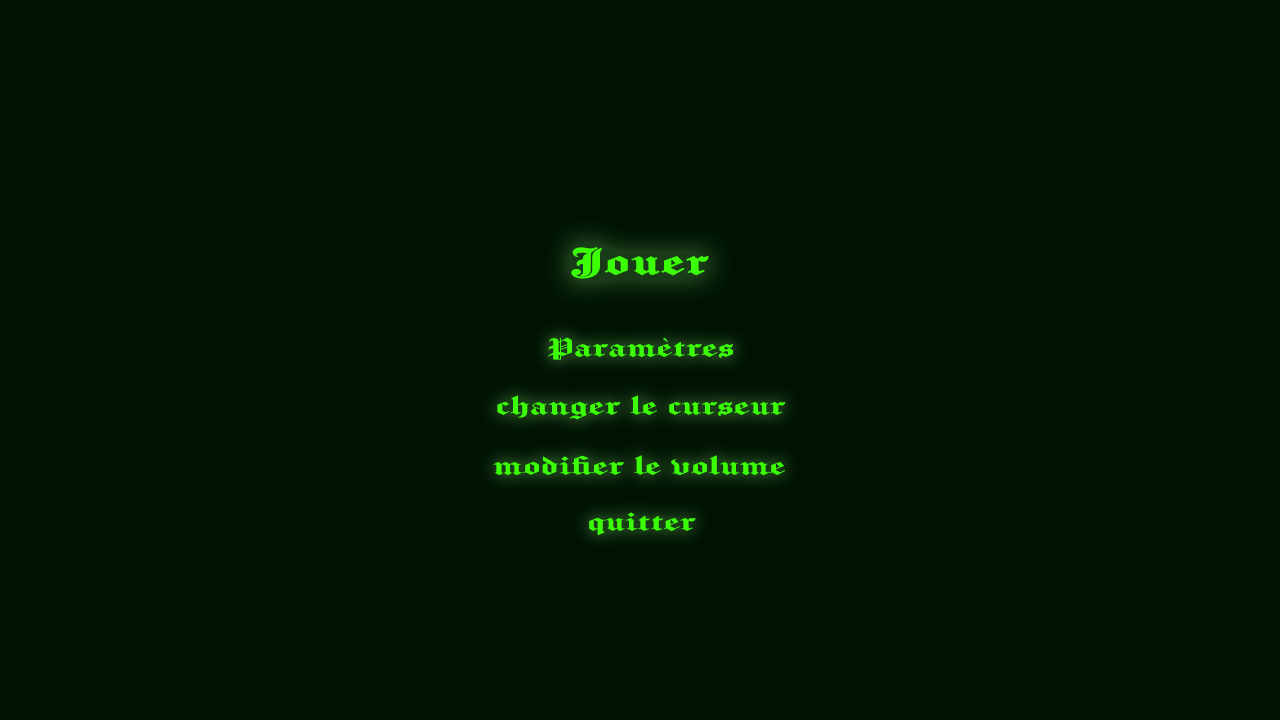
<style>
.page{position:relative;width:1280px;height:720px;background:#001303}
.page>*{position:absolute;margin:0}
.t1{font:42.8px "Chomsky";letter-spacing:0.01em;color:#3cff07;font-weight:bold;scale:1.49 1}
.t2{font:30px "Chomsky";letter-spacing:0.01em;color:#3cff07;scale:1.49 1}
</style>
<div class="page">
<p class="t1" style="left:571px;top:247px;width:138px;height:32px">Jouer</p>
<p class="t2" style="left:548px;top:337px;width:185px;height:23px">Paramètres</p>
<p class="t2" style="left:497px;top:395px;width:289px;height:25px">changer le curseur</p>
<p class="t2" style="left:493px;top:455px;width:292px;height:20px">modifier le volume</p>
<p class="t2" style="left:589px;top:512px;width:107px;height:23px">quitter</p>
</div>
